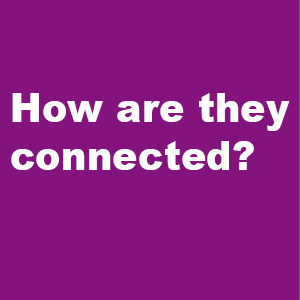
<style>
.page{position:relative;width:300px;height:300px;background:#84137d}
.page>*{position:absolute;margin:0}
.t1{font:39.6px "Arial-Black";color:#ffffff}
</style>
<div class="page">
<p class="t1" style="left:11px;top:93px;width:279px;height:77px">How are they connected?</p>
</div>
